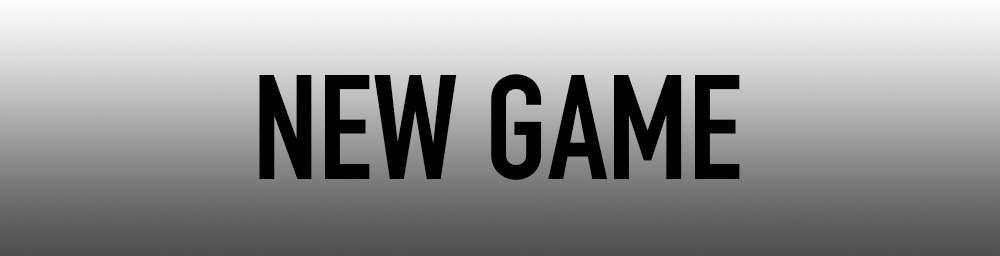
<style>
.page{position:relative;width:1000px;height:256px}
.page>*{position:absolute;margin:0}
.t1{font:145.8px "DINCondensed-Bold";color:#000000}
</style>
<div class="page">
<p class="t1" style="left:259px;top:74px;width:481px;height:106px">NEW GAME</p>
</div>
